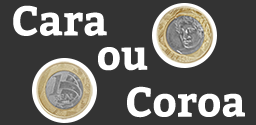
<style>
.page{position:relative;width:256px;height:125px;background:#333333}
.page>*{position:absolute;margin:0}
.t1{font:41.3px "Bitter-Bold";color:#ffffff}
</style>
<div class="page">
<p class="t1" style="left:13px;top:5px;width:94px;height:31px">Cara</p>
<p class="t1" style="left:98px;top:47px;width:50px;height:24px">ou</p>
<p class="t1" style="left:127px;top:86px;width:118px;height:32px">Coroa</p>
</div>
